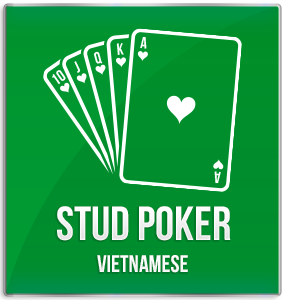
<style>
.page{position:relative;width:285px;height:300px}
.page>*{position:absolute;margin:0}
.t1{font:48px "BebasNeueBold";color:#ffffff;text-transform:uppercase}
.t2{font:24px "BebasNeueBold";color:#ffffff}
</style>
<div class="page">
<p class="t1" style="left:57px;top:206px;width:174px;height:35px">stud poker</p>
<p class="t2" style="left:97px;top:255px;width:91px;height:18px">vietnamese</p>
</div>
